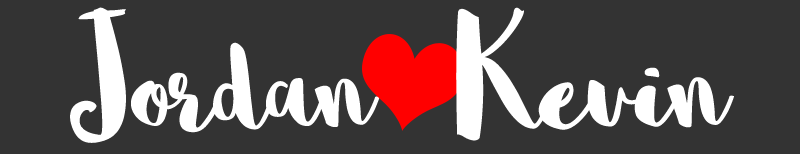
<style>
.page{position:relative;width:800px;height:154px;background:#333333}
.page>*{position:absolute;margin:0}
.t1{font:168.4px "Sophia";letter-spacing:-0.01em;color:#ffffff}
.t2{font:174.2px "Sophia";letter-spacing:-0.01em;color:#ffffff}
</style>
<div class="page">
<p class="t1" style="left:70px;top:7px;width:310px;height:136px">Jordan</p>
<p class="t2" style="left:456px;top:7px;width:278px;height:134px">Kevin</p>
</div>
